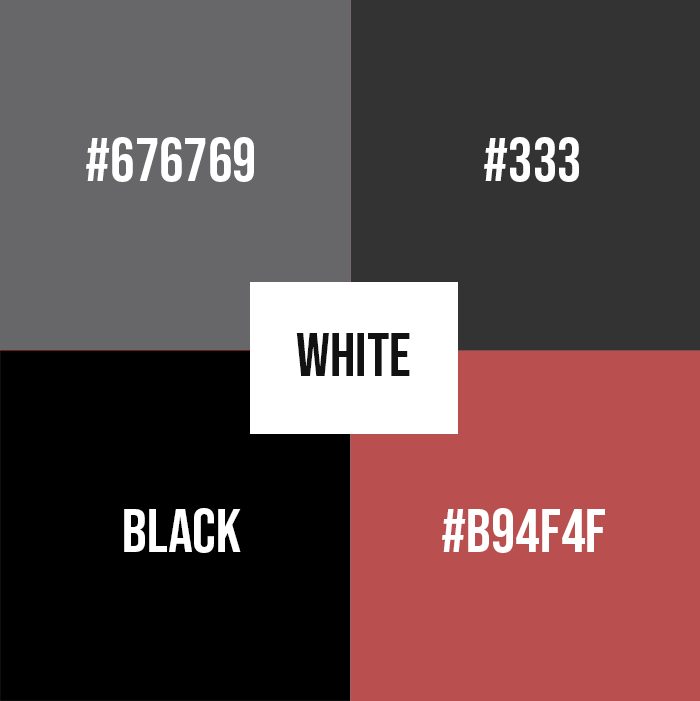
<style>
.page{position:relative;width:700px;height:701px;background:#333333}
.page>*{position:absolute;margin:0}
.t1{font:61px "BebasNeue-Regular";color:#ffffff}
.t2{font:61px "BebasNeue-Regular";color:#121212}
</style>
<div class="page">
<p class="t1" style="left:86px;top:137px;width:168px;height:45px">#676769</p>
<p class="t1" style="left:484px;top:137px;width:95px;height:45px">#333</p>
<p class="t2" style="left:296px;top:333px;width:114px;height:43px">white</p>
<p class="t1" style="left:124px;top:508px;width:117px;height:45px">black</p>
<p class="t1" style="left:442px;top:508px;width:163px;height:45px">#b94f4f</p>
</div>
